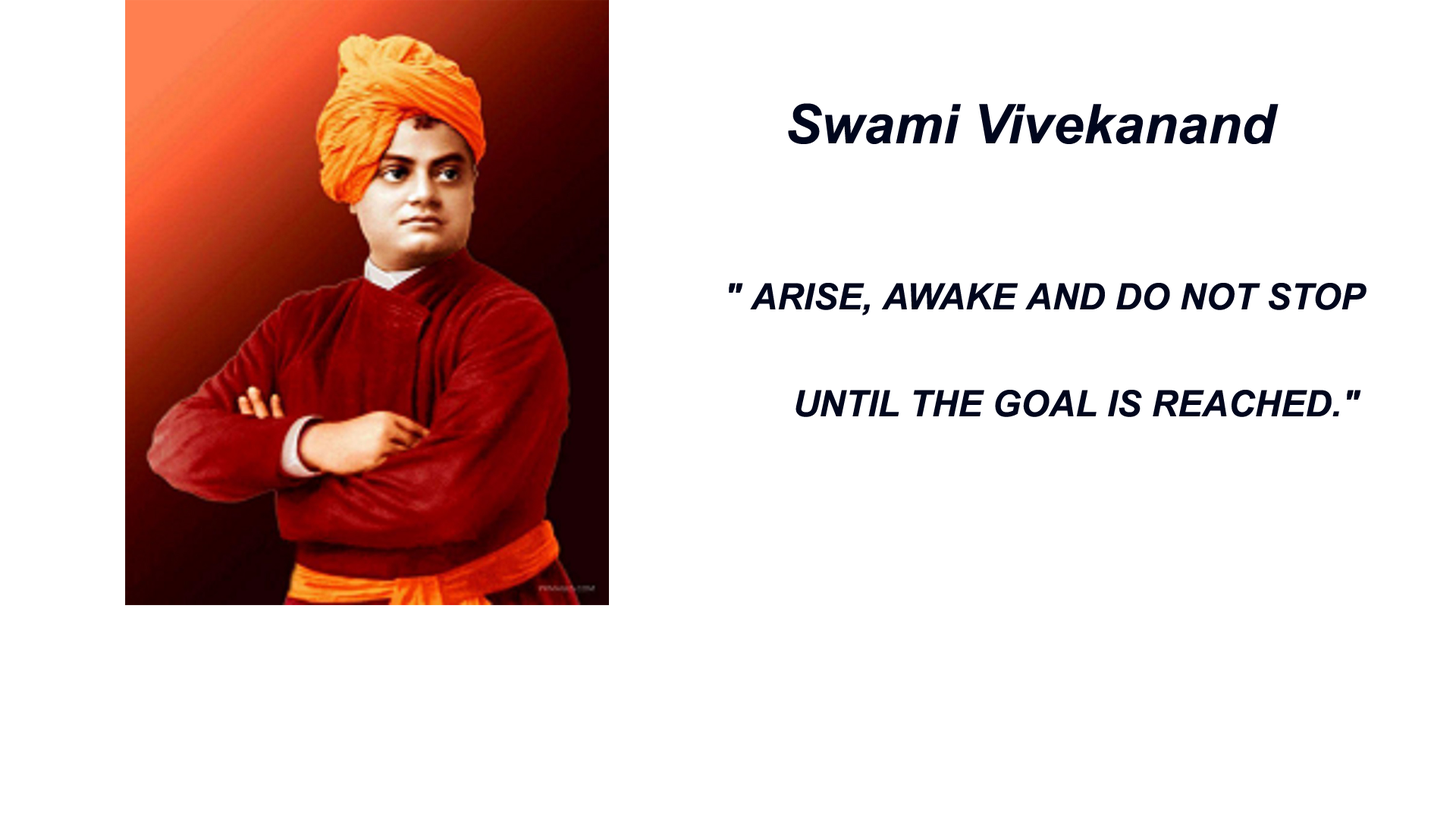
<style>
.page{position:relative;width:1456px;height:819px;background:#ffffff}
.page>*{position:absolute;margin:0}
.t1{font:54.6px "Arial-BoldItalicMT";color:#00061d}
.t2{font:36.4px "Arial-BoldItalicMT";color:#00061d}
</style>
<div class="page">
<p class="t1" style="left:788px;top:103px;width:491px;height:41px">Swami Vivekanand</p>
<p class="t2" style="left:729px;top:283px;width:637px;height:32px">" ARISE, AWAKE AND DO NOT STOP</p>
<p class="t2" style="left:795px;top:390px;width:566px;height:27px">UNTIL THE GOAL IS REACHED."</p>
</div>
